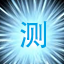
<style>
.page{position:relative;width:64px;height:64px}
.page>*{position:absolute;margin:0}
.t1{font:30px "AdobeHeitiStd-Regular";color:#00a3e4}
</style>
<div class="page">
<p class="t1" style="left:20px;top:21px;width:27px;height:28px">测</p>
</div>
